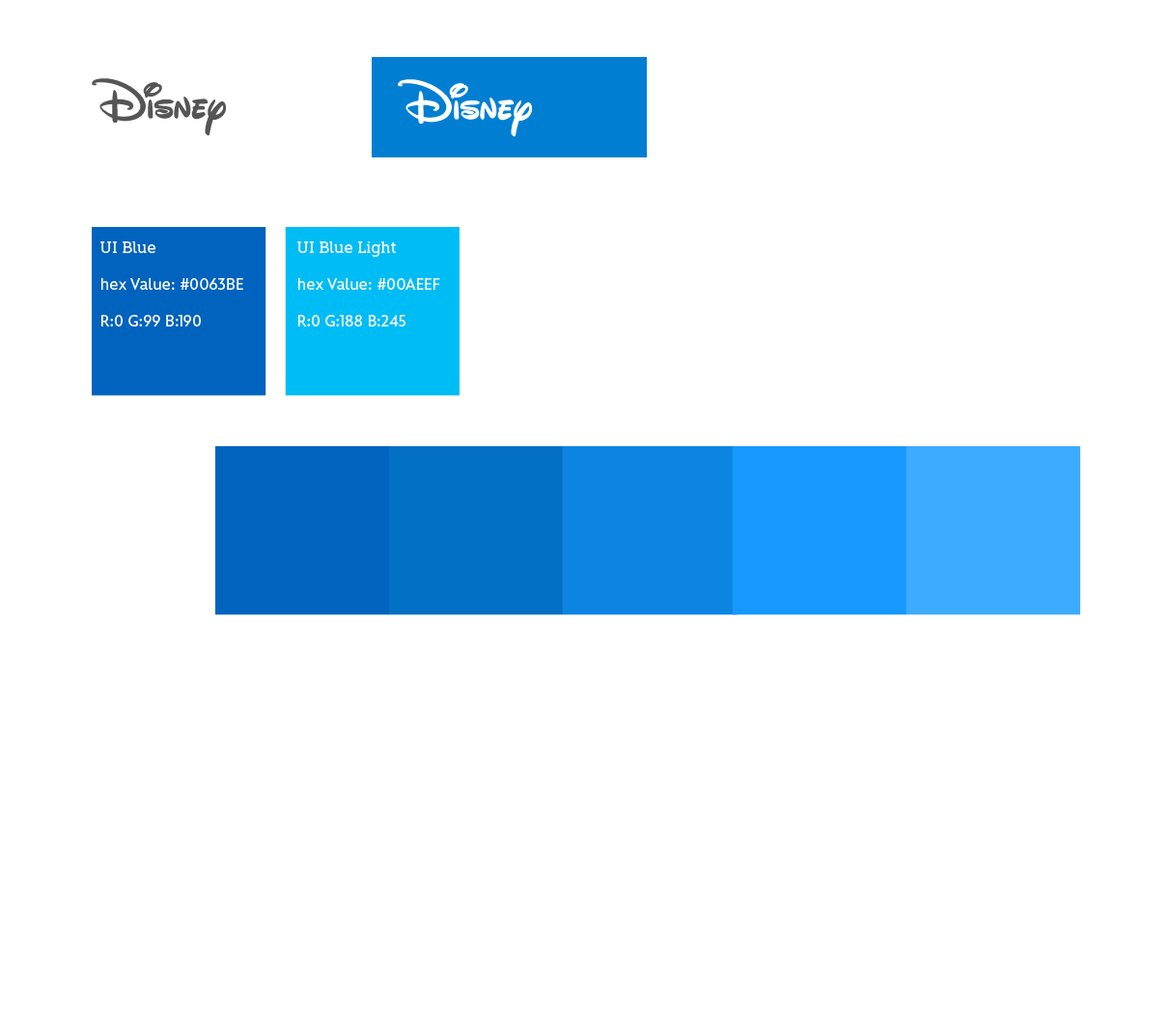
<style>
.page{position:relative;width:1172px;height:1017px;background:#ffffff}
.page>*{position:absolute;margin:0}
.t1{font:15.5px/19.3px "Matterhorn";color:#ffffff}
.t2{font:15.5px/19.3px "MatterhornSerif";color:#ffffff}
.t3{font:15.5px/19.3px "Matterhorn"}
.t4{font:15.5px/19.3px "MatterhornSerif"}
</style>
<div class="page">
<p class="t1" style="left:100px;top:241px;width:143px;height:85px"><span class="t2">UI Blue<br></span>hex Value: #0063BE<br>R:0 G:99 B:190</p>
<p class="t3" style="left:292px;top:241px;width:144px;height:85px"><span class="t4">WE Dark Blue <br></span>hex Value: #007FD2<br>R:0 G:127 B:210</p>
<p class="t1" style="left:297px;top:241px;width:143px;height:85px"><span class="t2">UI Blue Light<br></span>hex Value: #00AEEF<br>R:0 G:188 B:245</p>
</div>
